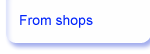
<style>
.page{position:relative;width:150px;height:54px;background:#fefefe}
.page>*{position:absolute;margin:0}
.t1{font:14px "ArialMT";color:#0326fb}
</style>
<div class="page">
<p class="t1" style="left:20px;top:15px;width:73px;height:13px">From shops</p>
</div>
